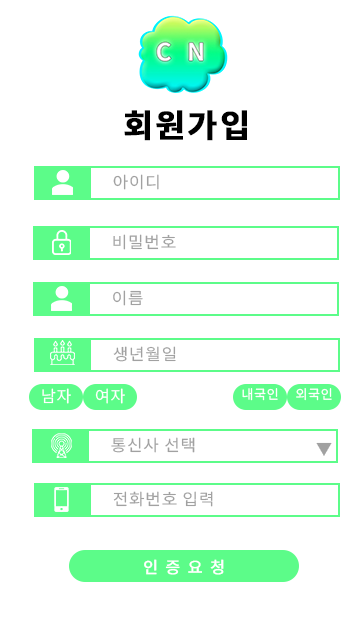
<style>
.page{position:relative;width:360px;height:640px;background:#ffffff}
.page>*{position:absolute;margin:0}
.t1{font:32px "NotoSansKR-Bold";letter-spacing:0.06em;color:#000000;font-weight:bold}
.t2{font:16px "NotoSansKR-Regular";letter-spacing:0.05em;color:#a1a1a1;scale:1.05 1}
.t3{font:16px "NotoSansKR-Regular";letter-spacing:0.05em;color:#ffffff}
.t4{font:13px "NotoSansKR-Regular";letter-spacing:0.05em;color:#ffffff}
.t5{font:16px "NotoSansKR-Regular";letter-spacing:0.05em;color:#a1a1a1}
.t6{font:16px "NotoSansKR-Regular";letter-spacing:0.45em;color:#ffffff;font-weight:bold}
</style>
<div class="page">
<p class="t1" style="left:124px;top:110px;width:123px;height:31px">회원가입</p>
<p class="t2" style="left:113px;top:174px;width:46px;height:16px">아이디</p>
<p class="t2" style="left:113px;top:234px;width:63px;height:16px">비밀번호</p>
<p class="t2" style="left:113px;top:290px;width:30px;height:16px">이름</p>
<p class="t2" style="left:113px;top:346px;width:63px;height:16px">생년월일</p>
<p class="t3" style="left:42px;top:388px;width:29px;height:16px">남자</p>
<p class="t3" style="left:95px;top:388px;width:30px;height:16px">여자</p>
<p class="t4" style="left:242px;top:388px;width:36px;height:13px">내국인</p>
<p class="t4" style="left:296px;top:388px;width:36px;height:13px">외국인</p>
<p class="t2" style="left:111px;top:437px;width:84px;height:16px">통신사 선택</p>
<p class="t5" style="left:316px;top:442px;width:16px;height:14px">▼</p>
<p class="t2" style="left:113px;top:491px;width:100px;height:16px">전화번호 입력</p>
<p class="t6" style="left:144px;top:559px;width:80px;height:16px">인증요청</p>
</div>
